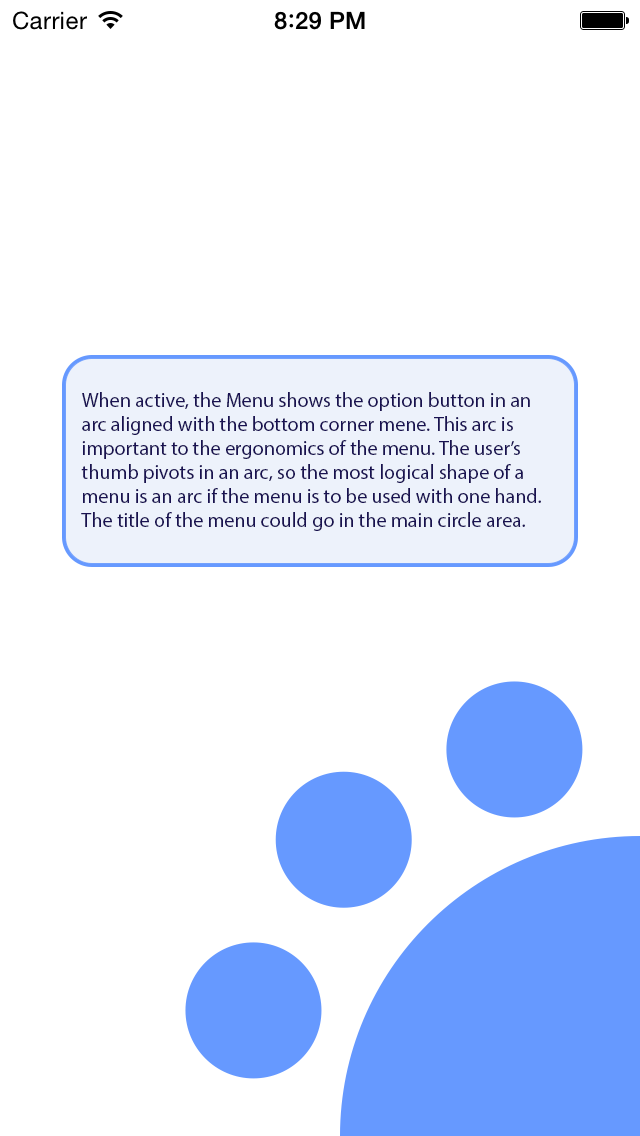
<style>
.page{position:relative;width:640px;height:1136px;background:#ffffff}
.page>*{position:absolute;margin:0}
.t1{font:20.1px "MyriadPro-Regular";color:#191251}
</style>
<div class="page">
<p class="t1" style="left:81px;top:392px;width:460px;height:139px">When active, the Menu shows the option button in an<br>arc aligned with the bottom corner mene. This arc is <br>important to the ergonomics of the menu. The user’s <br>thumb pivots in an arc, so the most logical shape of a <br>menu is an arc if the menu is to be used with one hand.<br>The title of the menu could go in the main circle area.</p>
</div>
